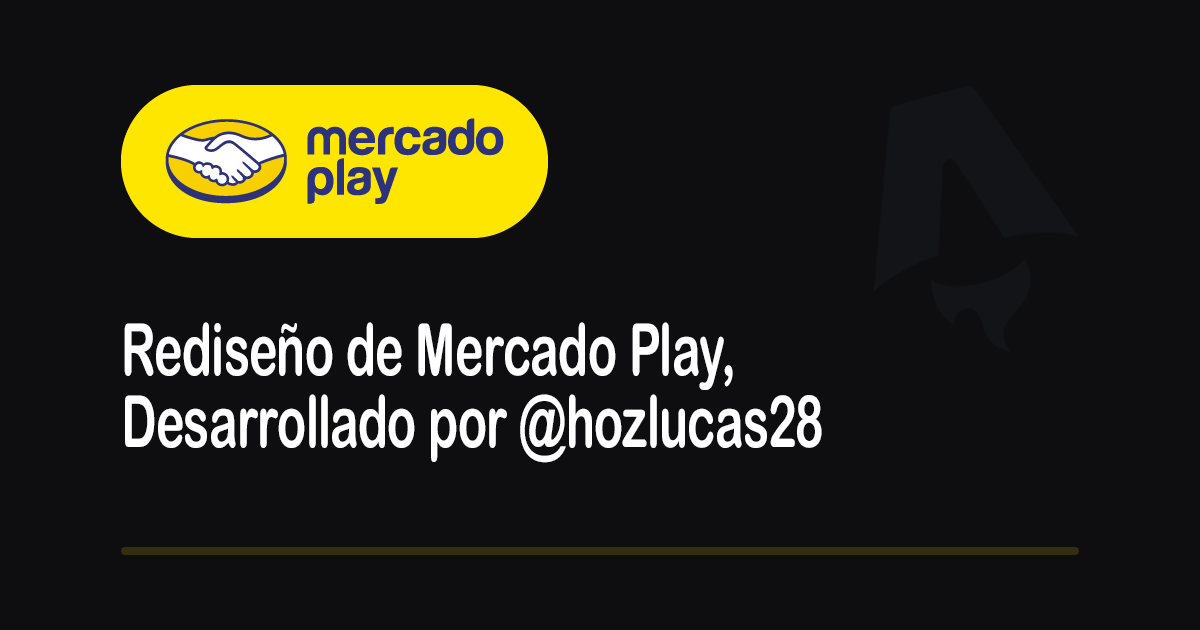
<style>
.page{position:relative;width:1200px;height:630px;background:#0e0e11}
.page>*{position:absolute;margin:0}
.t1{font:72px/72px "ArialRoundedMTBold";color:#ffffff;scale:0.67 1}
</style>
<div class="page">
<p class="t1" style="left:124px;top:322px;width:698px;height:141px">Rediseño de Mercado Play,<br>Desarrollado por @hozlucas28</p>
</div>
